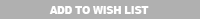
<style>
.page{position:relative;width:200px;height:19px;background:#b0b0b0}
.page>*{position:absolute;margin:0}
.t1{font:18.2px "Arial-Black";color:#ffffff;scale:0.9 1}
</style>
<div class="page">
<p class="t1" style="left:49px;top:6px;width:100px;height:8px">ADD TO WISH LIST</p>
</div>
